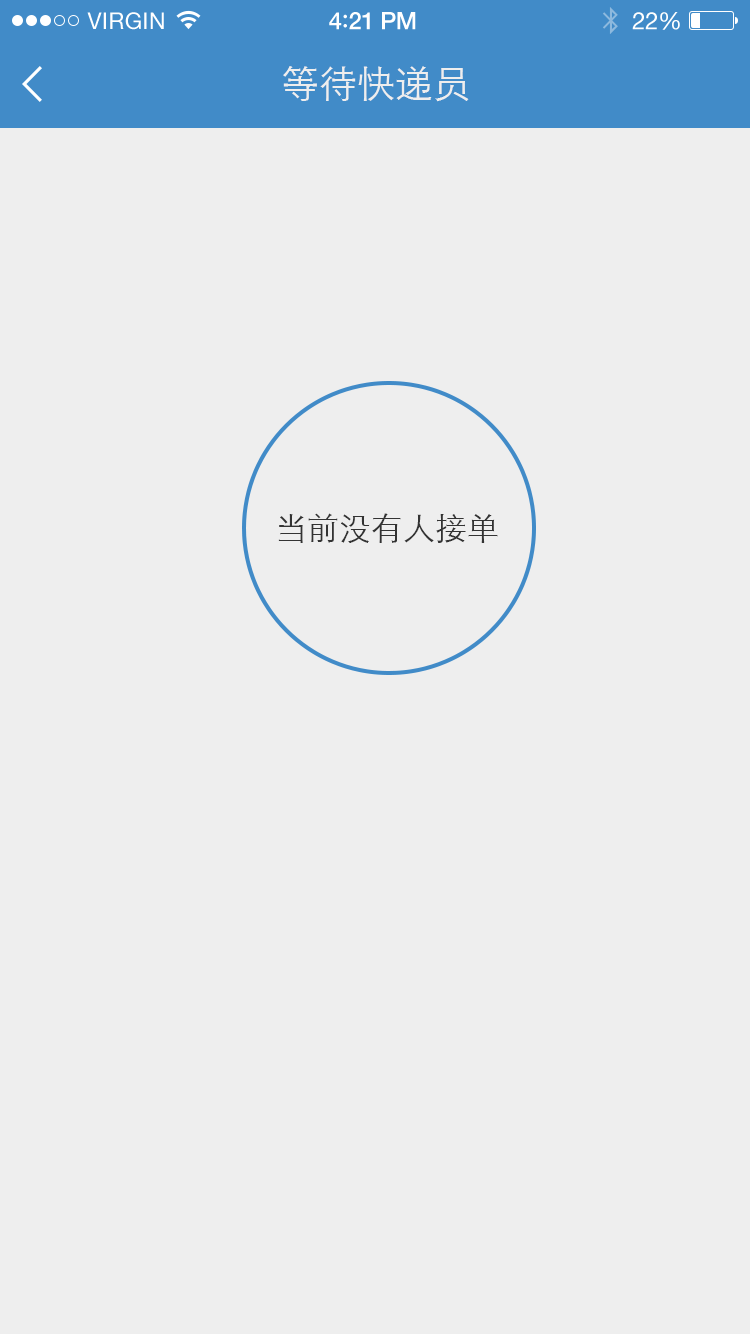
<style>
.page{position:relative;width:750px;height:1334px;background:#eeeeee}
.page>*{position:absolute;margin:0}
.t1{font:23px "HelveticaNeue";letter-spacing:0.02em;color:#ffffff}
.t2{font:24px "HelveticaNeue-Medium";letter-spacing:-0.02em;color:#ffffff}
.t3{font:26px "Avenir-Medium";letter-spacing:-0.02em;color:#ffffff}
.t4{font:24px "HelveticaNeue";letter-spacing:-0.02em;color:#ffffff}
.t5{font:38px "STXihei";color:#eeeeee}
.t6{font:32px "STXihei";color:#333333}
</style>
<div class="page">
<p class="t1" style="left:87px;top:12px;width:77px;height:18px">VIRGIN</p>
<p class="t2" style="left:329px;top:12px;width:87px;height:18px">4<span class="t3">:</span>21 PM</p>
<p class="t4" style="left:632px;top:12px;width:48px;height:18px">22%</p>
<p class="t5" style="left:283px;top:66px;width:186px;height:36px">等待快递员</p>
<p class="t6" style="left:278px;top:513px;width:220px;height:30px">当前没有人接单</p>
</div>
